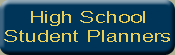
<style>
.page{position:relative;width:175px;height:55px;background:#00355a}
.page>*{position:absolute;margin:0}
.t1{font:15.9px "ArialMT";color:#ebce54;scale:1.39 1}
</style>
<div class="page">
<p class="t1" style="left:4px;top:11px;width:166px;height:31px;text-align:center">High School<br>Student Planners</p>
</div>
